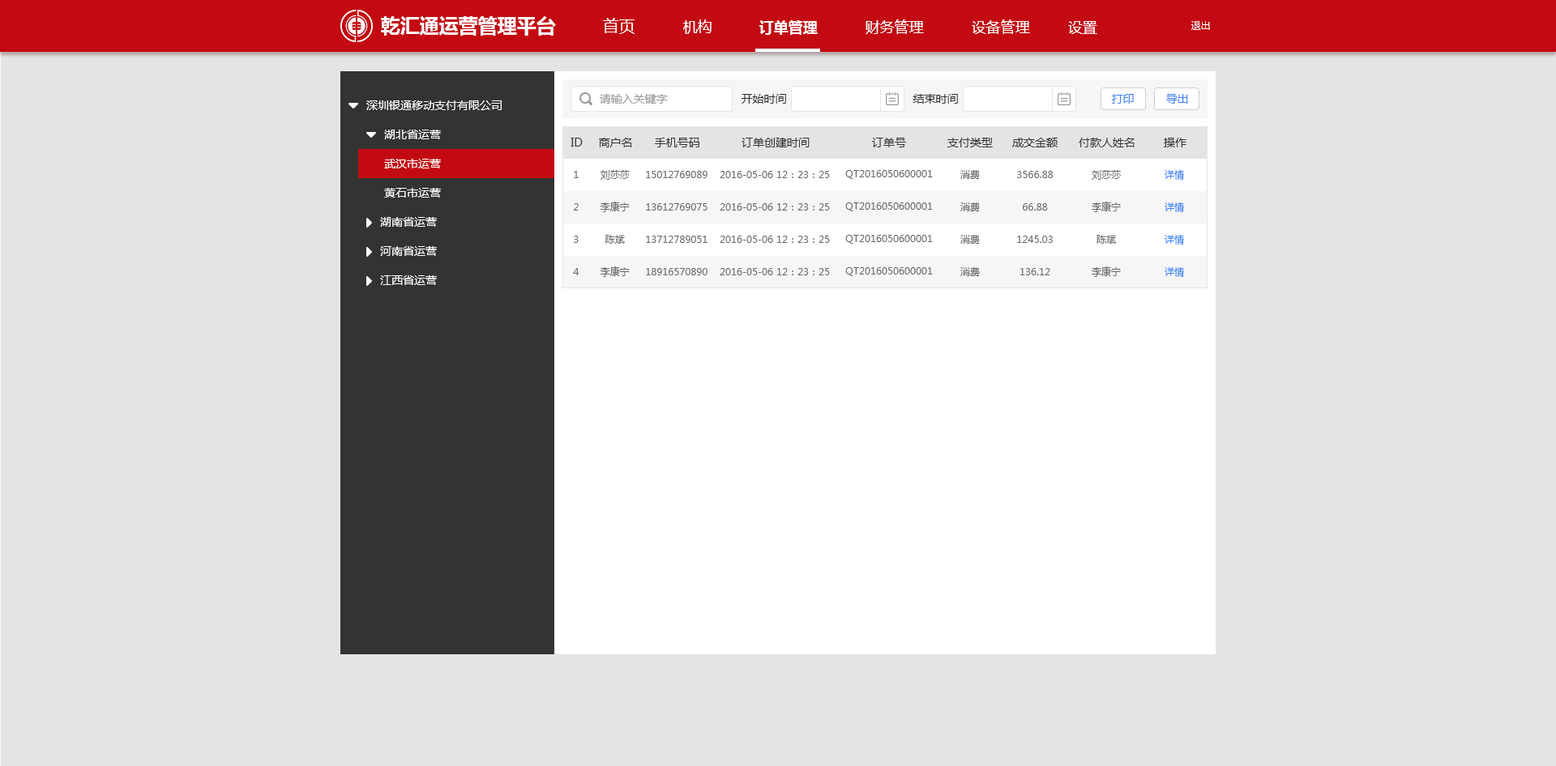
<style>
.page{position:relative;width:1556px;height:766px;background:#e4e4e4}
.page>*{position:absolute;margin:0}
.t1{font:19.4px "MicrosoftYaHei-Bold";color:#ffffff}
.t2{font:16.2px "MicrosoftYaHei";color:#ffffff}
.t3{font:14.6px "MicrosoftYaHei";color:#ffffff}
.t4{font:14.6px "MicrosoftYaHei-Bold";color:#ffffff}
.t5{font:9.7px "MicrosoftYaHei";color:#ffffff}
.t6{font:11.3px "MicrosoftYaHei";color:#ffffff}
.t7{font:11.3px "MicrosoftYaHei";color:#999999}
.t8{font:11.3px "MicrosoftYaHei";color:#333333}
.t9{font:11.3px "MicrosoftYaHei";color:#3880f6}
.t10{font:9.7px "MicrosoftYaHei";color:#666666}
.t11{font:9.7px "MicrosoftYaHei";color:#3880f6}
</style>
<div class="page">
<p class="t1" style="left:381px;top:16px;width:175px;height:20px">乾汇通运营管理平台</p>
<p class="t2" style="left:603px;top:18px;width:31px;height:16px">首页</p>
<p class="t3" style="left:683px;top:19px;width:28px;height:15px">机构</p>
<p class="t4" style="left:759px;top:20px;width:59px;height:15px">订单管理</p>
<p class="t3" style="left:865px;top:19px;width:59px;height:15px">财务管理</p>
<p class="t3" style="left:971px;top:19px;width:59px;height:15px">设备管理</p>
<p class="t3" style="left:1068px;top:21px;width:29px;height:13px">设置</p>
<p class="t5" style="left:1190px;top:21px;width:20px;height:9px">退出</p>
<p class="t6" style="left:366px;top:100px;width:136px;height:10px">深圳银通移动支付有限公司</p>
<p class="t7" style="left:600px;top:94px;width:68px;height:10px">请输入关键字</p>
<p class="t8" style="left:741px;top:94px;width:45px;height:10px">开始时间</p>
<p class="t8" style="left:912px;top:94px;width:46px;height:10px">结束时间</p>
<p class="t9" style="left:1112px;top:94px;width:22px;height:10px">打印</p>
<p class="t9" style="left:1165px;top:94px;width:23px;height:10px">导出</p>
<p class="t6" style="left:384px;top:130px;width:57px;height:9px">湖北省运营</p>
<p class="t8" style="left:570px;top:138px;width:13px;height:9px">ID</p>
<p class="t8" style="left:599px;top:138px;width:33px;height:9px">商户名</p>
<p class="t8" style="left:655px;top:138px;width:44px;height:9px">手机号码</p>
<p class="t8" style="left:741px;top:138px;width:68px;height:9px">订单创建时间</p>
<p class="t8" style="left:872px;top:138px;width:34px;height:9px">订单号</p>
<p class="t8" style="left:947px;top:138px;width:46px;height:9px">支付类型</p>
<p class="t8" style="left:1012px;top:138px;width:45px;height:9px">成交金额</p>
<p class="t8" style="left:1078px;top:138px;width:56px;height:9px">付款人姓名</p>
<p class="t8" style="left:1164px;top:138px;width:22px;height:9px">操作</p>
<p class="t6" style="left:384px;top:159px;width:57px;height:10px">武汉市运营</p>
<p class="t10" style="left:574px;top:171px;width:5px;height:7px">1</p>
<p class="t10" style="left:600px;top:170px;width:30px;height:10px">刘莎莎</p>
<p class="t10" style="left:646px;top:171px;width:61px;height:7px">15012769089</p>
<p class="t10" style="left:720px;top:171px;width:110px;height:7px">2016-05-06 12：23：25</p>
<p class="t10" style="left:845px;top:170px;width:88px;height:9px">QT2016050600001</p>
<p class="t10" style="left:960px;top:170px;width:20px;height:9px">消费</p>
<p class="t10" style="left:1017px;top:171px;width:36px;height:7px">3566.88</p>
<p class="t10" style="left:1091px;top:170px;width:30px;height:10px">刘莎莎</p>
<p class="t11" style="left:1164px;top:170px;width:20px;height:10px">详情</p>
<p class="t6" style="left:384px;top:188px;width:57px;height:10px">黄石市运营</p>
<p class="t10" style="left:574px;top:203px;width:5px;height:8px">2</p>
<p class="t10" style="left:600px;top:202px;width:30px;height:10px">李康宁</p>
<p class="t10" style="left:646px;top:203px;width:61px;height:8px">13612769075</p>
<p class="t10" style="left:720px;top:203px;width:110px;height:8px">2016-05-06 12：23：25</p>
<p class="t10" style="left:845px;top:203px;width:88px;height:8px">QT2016050600001</p>
<p class="t10" style="left:960px;top:203px;width:20px;height:8px">消费</p>
<p class="t10" style="left:1023px;top:203px;width:25px;height:8px">66.88</p>
<p class="t10" style="left:1091px;top:202px;width:30px;height:10px">李康宁</p>
<p class="t11" style="left:1164px;top:203px;width:20px;height:9px">详情</p>
<p class="t6" style="left:380px;top:217px;width:57px;height:10px">湖南省运营</p>
<p class="t10" style="left:574px;top:236px;width:5px;height:7px">3</p>
<p class="t10" style="left:605px;top:235px;width:20px;height:9px">陈斌</p>
<p class="t10" style="left:646px;top:236px;width:61px;height:7px">13712789051</p>
<p class="t10" style="left:720px;top:236px;width:110px;height:7px">2016-05-06 12：23：25</p>
<p class="t10" style="left:845px;top:235px;width:88px;height:9px">QT2016050600001</p>
<p class="t10" style="left:960px;top:235px;width:20px;height:9px">消费</p>
<p class="t10" style="left:1017px;top:236px;width:36px;height:7px">1245.03</p>
<p class="t10" style="left:1096px;top:235px;width:20px;height:9px">陈斌</p>
<p class="t11" style="left:1164px;top:235px;width:20px;height:10px">详情</p>
<p class="t6" style="left:380px;top:246px;width:57px;height:10px">河南省运营</p>
<p class="t10" style="left:573px;top:268px;width:6px;height:7px">4</p>
<p class="t10" style="left:600px;top:267px;width:30px;height:10px">李康宁</p>
<p class="t10" style="left:646px;top:268px;width:61px;height:7px">18916570890</p>
<p class="t10" style="left:720px;top:268px;width:110px;height:7px">2016-05-06 12：23：25</p>
<p class="t10" style="left:845px;top:267px;width:88px;height:9px">QT2016050600001</p>
<p class="t10" style="left:960px;top:267px;width:20px;height:9px">消费</p>
<p class="t10" style="left:1020px;top:268px;width:30px;height:7px">136.12</p>
<p class="t10" style="left:1091px;top:267px;width:30px;height:10px">李康宁</p>
<p class="t11" style="left:1164px;top:267px;width:20px;height:10px">详情</p>
<p class="t6" style="left:380px;top:275px;width:57px;height:10px">江西省运营</p>
</div>
